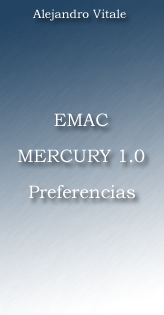
<style>
.page{position:relative;width:164px;height:315px}
.page>*{position:absolute;margin:0}
.t1{font:12px "BookmanOldStyle";color:#ffffff}
.t2{font:18px "BookmanOldStyle";color:#ffffff}
</style>
<div class="page">
<p class="t1" style="left:33px;top:9px;width:93px;height:12px">Alejandro Vitale</p>
<p class="t2" style="left:18px;top:113px;width:127px;height:50px;text-align:center">EMAC<br><br>MERCURY 1.0</p>
<p class="t2" style="left:29px;top:185px;width:106px;height:14px">Preferencias</p>
</div>
